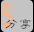
<style>
.page{position:relative;width:34px;height:32px;background:#c5c4c4}
.page>*{position:absolute;margin:0}
.t1{font:45.5px "ArialNarrow";color:#fcb285;scale:0.64 1}
.t2{font:14px "STLibian-SC-Regular"}
</style>
<div class="page">
<p class="t1" style="left:2px;top:3px;width:11px;height:25px">s</p>
<p class="t2" style="left:5px;top:19px;width:26px;height:10px">分享</p>
</div>
